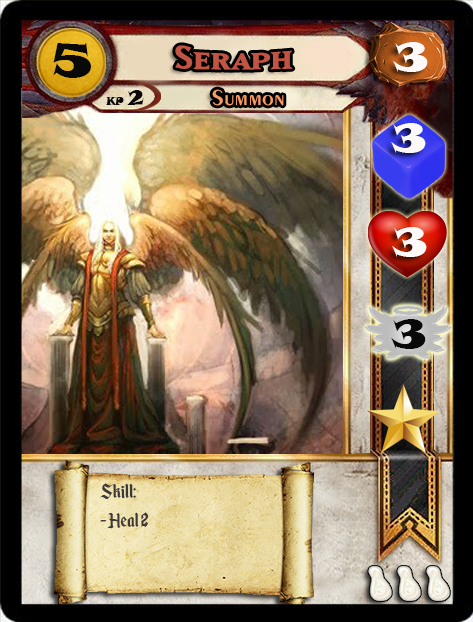
<style>
.page{position:relative;width:473px;height:622px}
.page>*{position:absolute;margin:0}
.t1{font:46.6px "SnapITC-Regular";color:#090909;scale:1.05 1}
.t2{font:40px "MatrixBoldSmallCaps";color:#c25443;scale:1.06 1}
.t3{font:40px "SnapITC-Regular";color:#fef9f9;scale:1.05 1}
.t4{font:22.7px "Exotic350BT-DemiBold";color:#f89c64;scale:1.06 1}
.t5{font:20.5px "SnapITC-Regular";color:#090909}
.t6{font:40px "SnapITC-Regular";color:#090909;scale:1.05 1}
.t7{font:24px "EnchantedLand";color:#3e3939}
</style>
<div class="page">
<p class="t1" style="left:53px;top:42px;width:38px;height:36px">5</p>
<p class="t2" style="left:175px;top:45px;width:118px;height:25px">Seraph</p>
<p class="t3" style="left:393px;top:42px;width:35px;height:30px">3</p>
<p class="t4" style="left:212px;top:89px;width:72px;height:17px">Summon</p>
<p class="t5" style="left:127px;top:90px;width:17px;height:15px">2</p>
<p class="t3" style="left:391px;top:123px;width:35px;height:30px">3</p>
<p class="t3" style="left:392px;top:227px;width:35px;height:30px">3</p>
<p class="t6" style="left:391px;top:319px;width:35px;height:30px">3</p>
<p class="t7" style="left:100px;top:483px;width:49px;height:46px">Skill:<br>- Heal 2</p>
</div>
